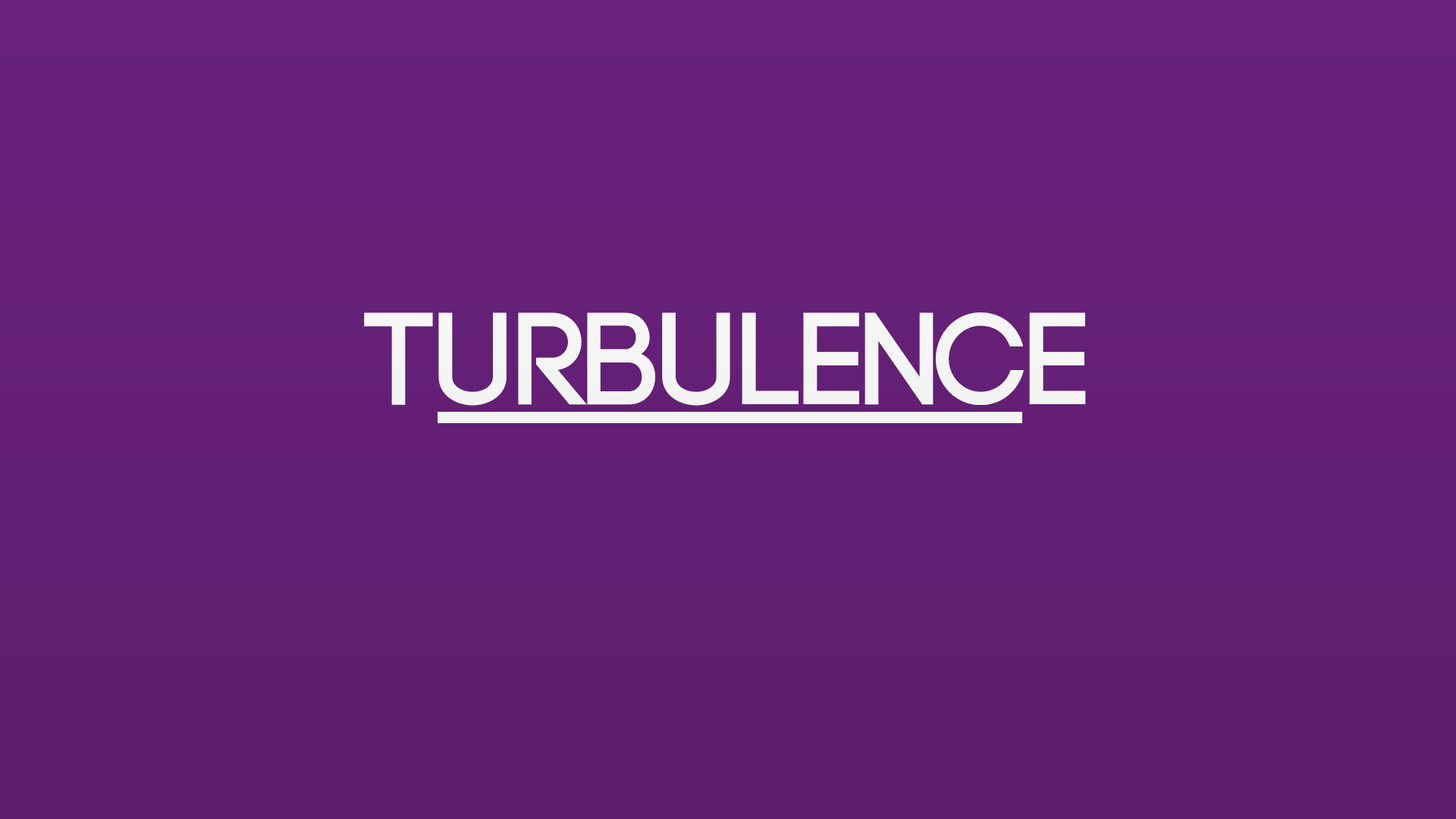
<style>
.page{position:relative;width:1456px;height:819px}
.page>*{position:absolute;margin:0}
.t1{font:130.4px "Code-Bold";color:#ffffff}
</style>
<div class="page">
<p class="t1" style="left:364px;top:312px;width:722px;height:94px">Turbulence</p>
</div>
